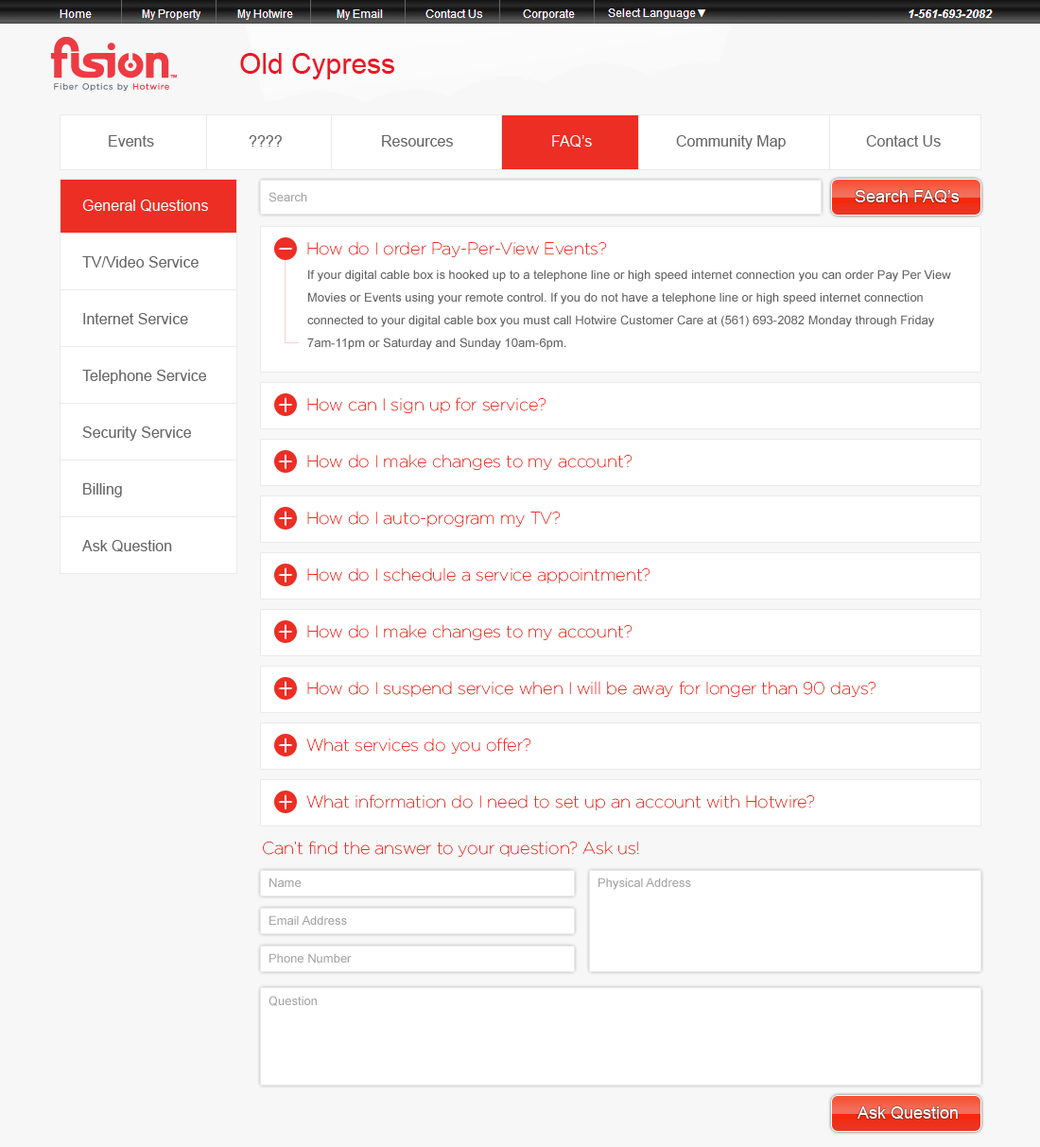
<style>
.page{position:relative;width:1040px;height:1147px;background:#ffffff}
.page>*{position:absolute;margin:0}
.t1{font:28.4px "ArialMT";color:#ed1625}
.t2{font:15.1px "ArialMT";color:#656665}
.t3{font:15.1px "ArialMT";color:#ffffff}
.t4{font:12.3px "ArialMT";color:#a4a4a4}
.t5{font:17px "ArialMT";color:#ffffff}
.t6{font:17px "Gotham-Thin";color:#ed2e24}
.t7{font:12.3px/22.7px "ArialMT";color:#636363}
</style>
<div class="page">
<p class="t1" style="left:240px;top:53px;width:154px;height:26px">Old Cypress</p>
<p class="t2" style="left:109px;top:135px;width:45px;height:12px">Events</p>
<p class="t2" style="left:109px;top:135px;width:45px;height:12px">Events</p>
<p class="t2" style="left:249px;top:135px;width:33px;height:12px">????</p>
<p class="t2" style="left:382px;top:135px;width:71px;height:12px">Resources</p>
<p class="t2" style="left:382px;top:135px;width:71px;height:12px">Resources</p>
<p class="t3" style="left:552px;top:135px;width:40px;height:12px">FAQ’s</p>
<p class="t2" style="left:676px;top:135px;width:110px;height:14px">Community Map</p>
<p class="t2" style="left:866px;top:135px;width:75px;height:12px">Contact Us</p>
<p class="t4" style="left:268px;top:192px;width:39px;height:10px">Search</p>
<p class="t5" style="left:855px;top:190px;width:105px;height:13px">Search FAQ’s</p>
<p class="t3" style="left:82px;top:199px;width:126px;height:13px">General Questions</p>
<p class="t6" style="left:307px;top:241px;width:300px;height:16px">How do I order Pay-Per-View Events?</p>
<p class="t2" style="left:82px;top:256px;width:117px;height:12px">TV/Video Service</p>
<p class="t7" style="left:307px;top:269px;width:644px;height:81px">If your digital cable box is hooked up to a telephone line or high speed internet connection you can order Pay Per View Movies or Events using your remote control. If you do not have a telephone line or high speed internet connection connected to your digital cable box you must call Hotwire Customer Care at (561) 693-2082 Monday through Friday 7am-11pm or Saturday and Sunday 10am-6pm.</p>
<p class="t2" style="left:83px;top:313px;width:105px;height:11px">Internet Service</p>
<p class="t2" style="left:82px;top:370px;width:125px;height:14px">Telephone Service</p>
<p class="t6" style="left:307px;top:397px;width:239px;height:16px">How can I sign up for service?</p>
<p class="t2" style="left:82px;top:426px;width:110px;height:15px">Security Service</p>
<p class="t6" style="left:307px;top:454px;width:325px;height:16px">How do I make changes to my account?</p>
<p class="t2" style="left:83px;top:483px;width:39px;height:14px">Billing</p>
<p class="t6" style="left:307px;top:510px;width:254px;height:17px">How do I auto-program my TV?</p>
<p class="t2" style="left:82px;top:540px;width:90px;height:12px">Ask Question</p>
<p class="t6" style="left:307px;top:567px;width:343px;height:16px">How do I schedule a service appointment?</p>
<p class="t6" style="left:307px;top:624px;width:325px;height:16px">How do I make changes to my account?</p>
<p class="t6" style="left:307px;top:681px;width:569px;height:16px">How do I suspend service when I will be away for longer than 90 days?</p>
<p class="t6" style="left:306px;top:737px;width:225px;height:16px">What services do you offer?</p>
<p class="t6" style="left:306px;top:794px;width:509px;height:16px">What information do I need to set up an account with Hotwire?</p>
<p class="t6" style="left:263px;top:840px;width:376px;height:16px">Can’t find the answer to your question? Ask us!</p>
<p class="t4" style="left:269px;top:877px;width:33px;height:10px">Name</p>
<p class="t4" style="left:598px;top:877px;width:93px;height:13px">Physical Address</p>
<p class="t4" style="left:269px;top:915px;width:78px;height:10px">Email Address</p>
<p class="t4" style="left:269px;top:953px;width:83px;height:9px">Phone Number</p>
<p class="t4" style="left:268px;top:995px;width:49px;height:11px">Question</p>
<p class="t5" style="left:856px;top:1106px;width:102px;height:13px">Ask Question</p>
</div>
